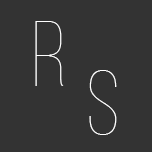
<style>
.page{position:relative;width:152px;height:152px;background:#333333}
.page>*{position:absolute;margin:0}
.t1{font:91.9px "BebasNeue-Thin";color:#ffffff}
</style>
<div class="page">
<p class="t1" style="left:35px;top:21px;width:29px;height:65px">R</p>
<p class="t1" style="left:89px;top:70px;width:28px;height:65px">S</p>
</div>
